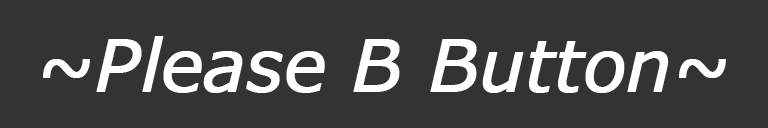
<style>
.page{position:relative;width:768px;height:128px;background:#333333}
.page>*{position:absolute;margin:0}
.t1{font:71px "MeiryoUI-Italic";color:#ffffff;font-weight:bold}
</style>
<div class="page">
<p class="t1" style="left:43px;top:36px;width:683px;height:57px">~Please B Button~</p>
</div>
